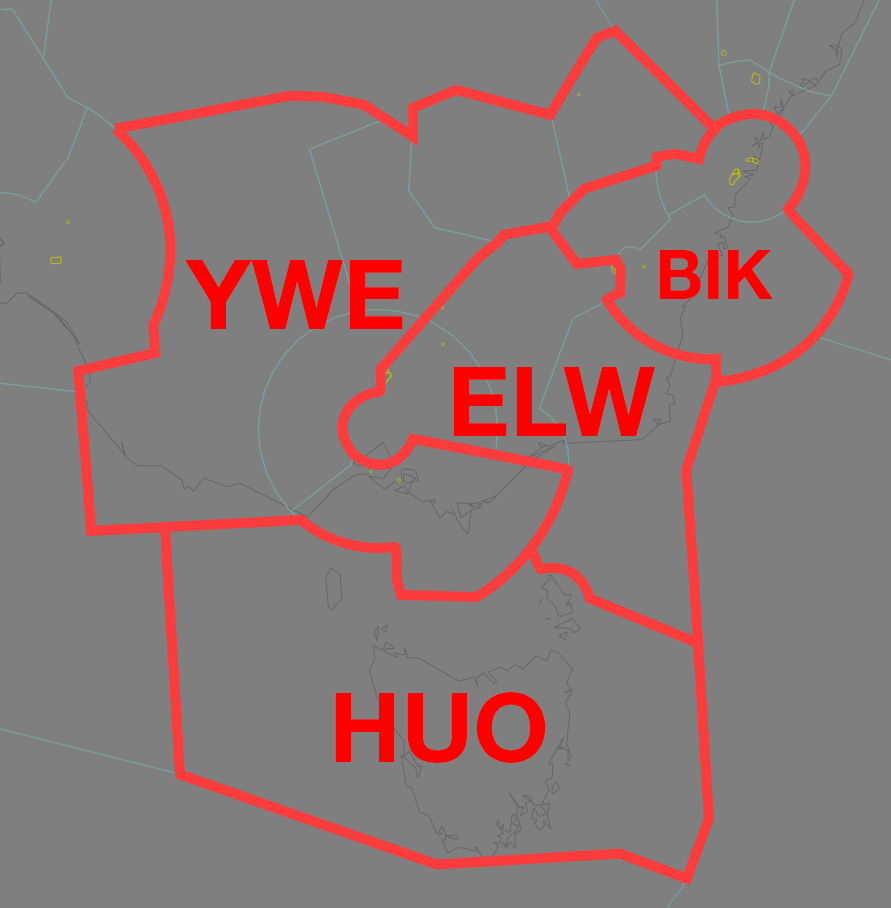
<style>
.page{position:relative;width:891px;height:908px;background:#7f7f7f}
.page>*{position:absolute;margin:0}
.t1{font:68.7px "HelveticaNeueLTStd-Bd";color:#ff0000}
.t2{font:97.3px "HelveticaNeueLTStd-Bd";color:#ff0000}
</style>
<div class="page">
<p class="t1" style="left:660px;top:250px;width:113px;height:49px">BIK</p>
<p class="t2" style="left:185px;top:260px;width:218px;height:69px">YWE</p>
<p class="t2" style="left:453px;top:367px;width:202px;height:69px">ELW</p>
<p class="t2" style="left:335px;top:692px;width:211px;height:71px">HUO</p>
</div>
